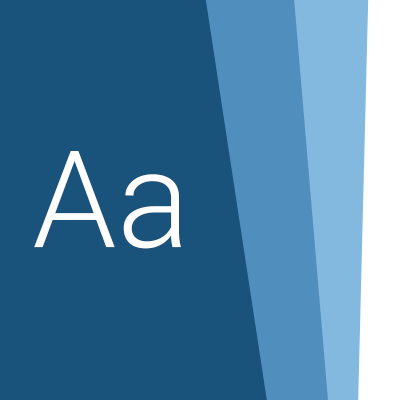
<style>
.page{position:relative;width:400px;height:400px;background:#19527b}
.page>*{position:absolute;margin:0}
.t1{font:135px "Roboto-Light";color:#ffffff}
</style>
<div class="page">
<p class="t1" style="left:34px;top:151px;width:147px;height:98px">Aa</p>
</div>
